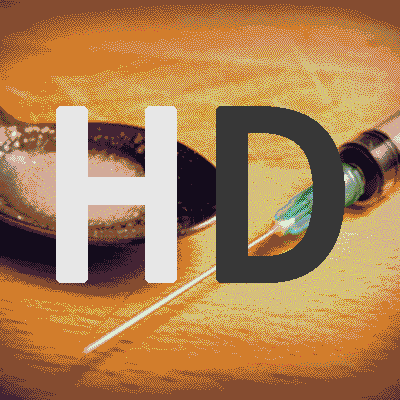
<style>
.page{position:relative;width:400px;height:400px;background:#d27d2c}
.page>*{position:absolute;margin:0}
.t1{font:256px "LiberationMono";color:#e7e7e7;font-weight:bold}
.t2{font:256px "LiberationMono";color:#373737;font-weight:bold}
</style>
<div class="page">
<p class="t1" style="left:56px;top:106px;width:289px;height:177px">H<span class="t2">D</span></p>
</div>
